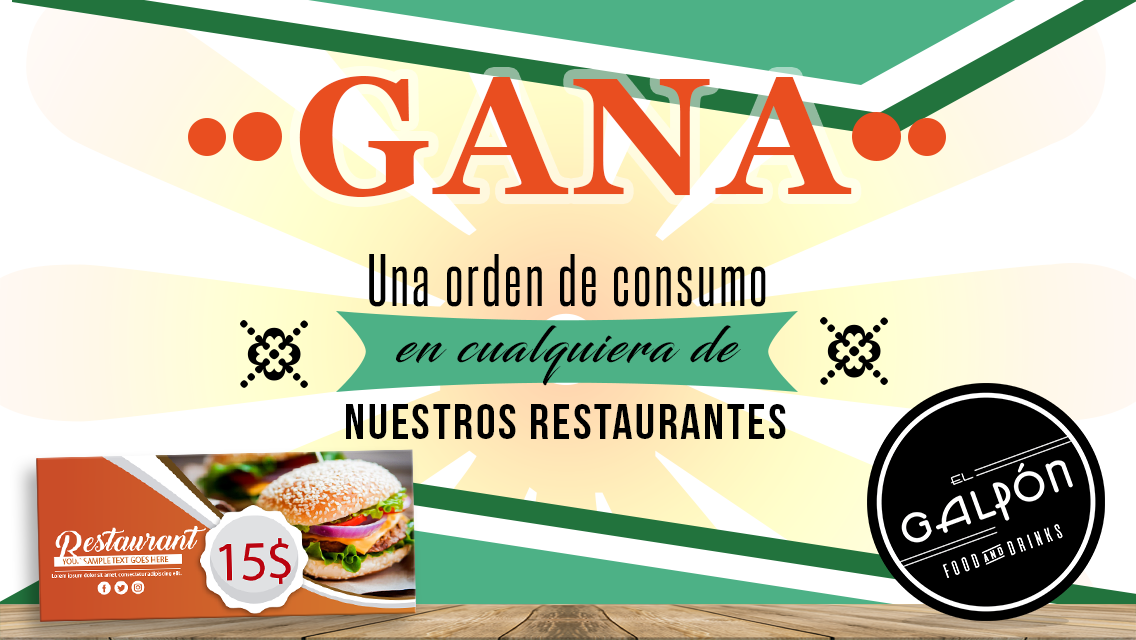
<style>
.page{position:relative;width:1136px;height:640px;background:#ffffff}
.page>*{position:absolute;margin:0}
.t1{font:166.1px "Georgia-Bold";letter-spacing:0.05em;color:#e94e20}
.t2{font:62.5px "SteelfishRg-Regular";letter-spacing:0.05em;color:#000000}
.t3{font:50px "Blacksword";letter-spacing:0.05em;color:#000000}
.t4{font:50px "BebasNeue";letter-spacing:0.05em;color:#000000}
</style>
<div class="page">
<p class="t1" style="left:299px;top:76px;width:553px;height:121px">GANA</p>
<p class="t2" style="left:369px;top:254px;width:397px;height:53px">Una orden de consumo</p>
<p class="t3" style="left:396px;top:325px;width:345px;height:61px">en cualquiera de</p>
<p class="t4" style="left:346px;top:404px;width:440px;height:35px">nuestros restaurantes</p>
</div>
